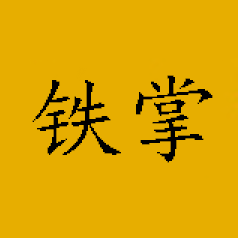
<style>
.page{position:relative;width:238px;height:238px;background:#e7ae00}
.page>*{position:absolute;margin:0}
.t1{font:96px "¿¬Ìå";color:#000000;text-transform:uppercase}
</style>
<div class="page">
<p class="t1" style="left:32px;top:75px;width:181px;height:88px">铁掌</p>
</div>
